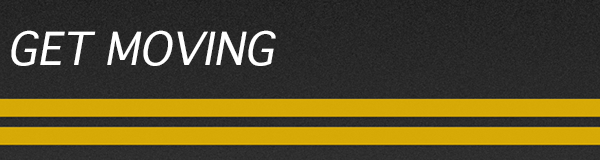
<style>
.page{position:relative;width:600px;height:160px}
.page>*{position:absolute;margin:0}
.t1{font:43.6px "Thonburi";color:#ffffff;text-transform:uppercase;font-style:italic}
</style>
<div class="page">
<p class="t1" style="left:11px;top:30px;width:265px;height:36px">GET moving</p>
</div>
